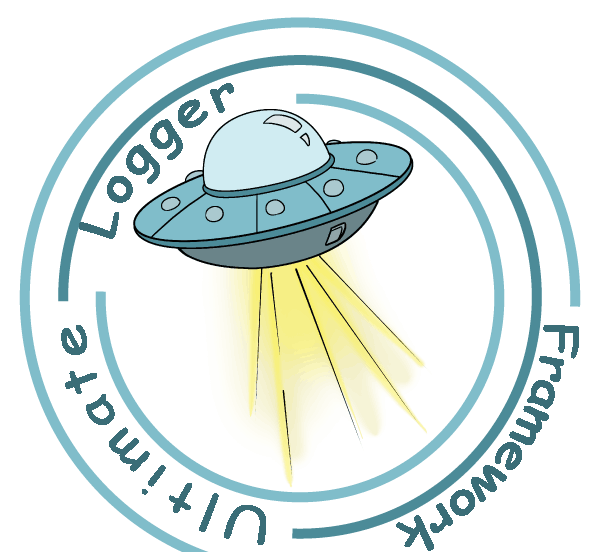
<style>
.page{position:relative;width:600px;height:552px;background:#ffffff}
.page>*{position:absolute;margin:0}
.t1{font:47px "ComicSansMS";letter-spacing:0.1em;color:#3a6d77}
.t2{font:49px "ComicSansMS";letter-spacing:0.14em;color:#3a6d77}
.t3{font:46px "ComicSansMS";color:#3a6d77}
</style>
<div class="page">
<p class="t1" style="left:79px;top:83px;width:155px;height:156px;rotate:-46deg">Logger</p>
<p class="t2" style="left:61px;top:325px;width:205px;height:220px;rotate:-134deg">Ultimate</p>
<p class="t3" style="left:396px;top:325px;width:183px;height:226px;rotate:126deg">Framework</p>
</div>
